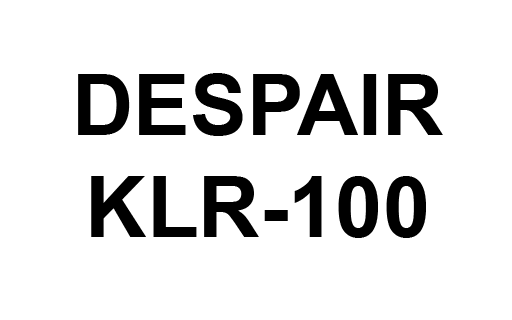
<style>
.page{position:relative;width:512px;height:320px;background:#ffffff}
.page>*{position:absolute;margin:0}
.t1{font:85px "Arial-BoldMT";color:#000000}
</style>
<div class="page">
<p class="t1" style="left:78px;top:73px;width:365px;height:165px;text-align:center">DESPAIR<br>KLR-100</p>
</div>
